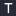
<style>
.page{position:relative;width:16px;height:16px;background:#282a36}
.page>*{position:absolute;margin:0}
.t1{font:14px "SFUIText-Regular";color:#ffffff}
</style>
<div class="page">
<p class="t1" style="left:4px;top:3px;width:9px;height:11px">T</p>
</div>
